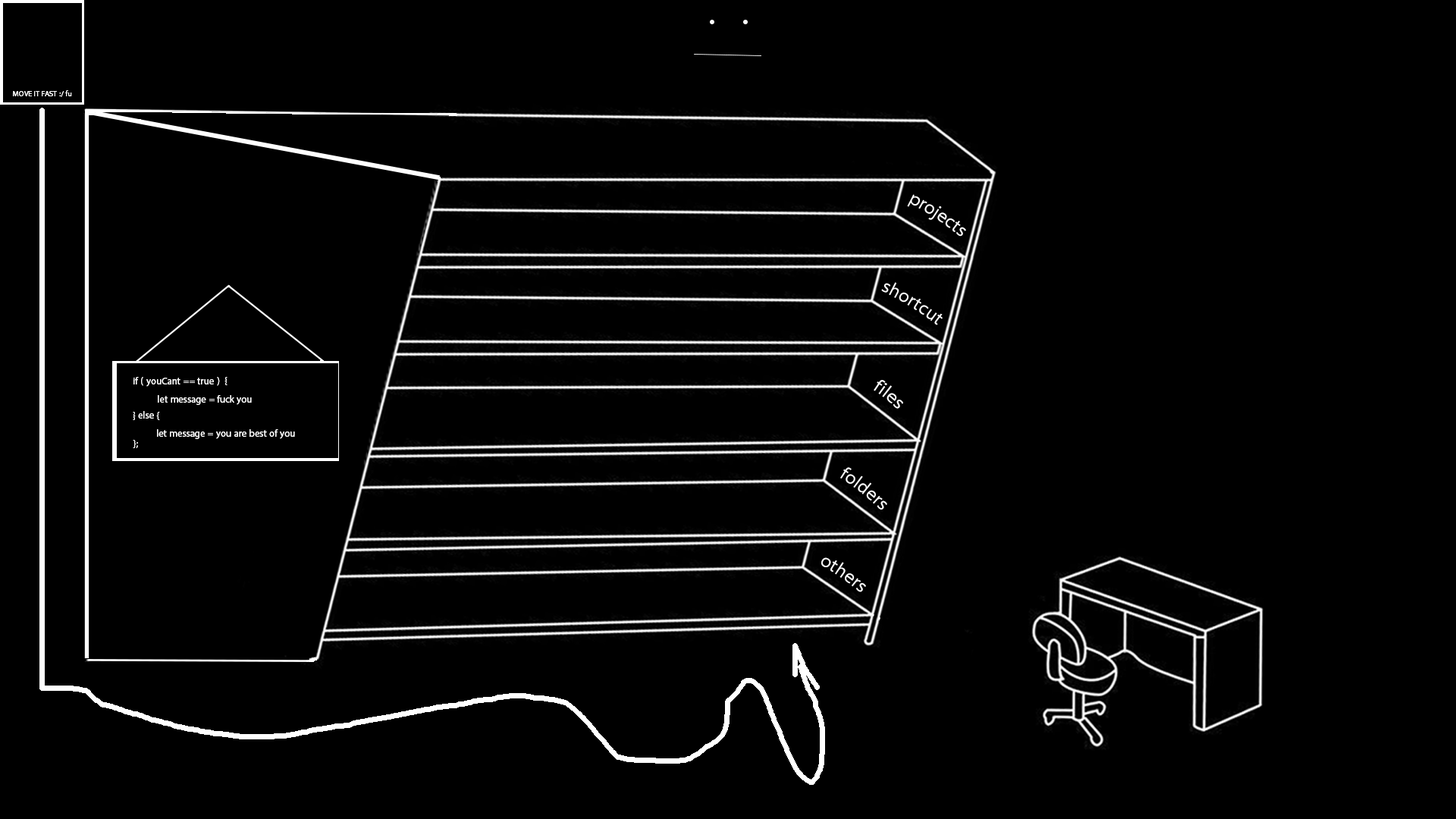
<style>
.page{position:relative;width:1456px;height:819px;background:#000000}
.page>*{position:absolute;margin:0}
.t1{font:10.6px "MyriadArabic-Regular";color:#ffffff}
.t2{font:25.7px "MyriadArabic-Regular";color:#ffffff}
.t3{font:13.6px "MyriadArabic-Regular";color:#ffffff}
</style>
<div class="page">
<p class="t1" style="left:13px;top:90px;width:59px;height:7px">MOVE IT FAST :/ fu</p>
<p class="t2" style="left:907px;top:194px;width:59px;height:43px;rotate:34deg">projects</p>
<p class="t2" style="left:881px;top:282px;width:62px;height:43px;rotate:32deg">shortcut</p>
<p class="t3" style="left:133px;top:377px;width:87px;height:10px">if ( youCant == true )</p>
<p class="t3" style="left:224px;top:377px;width:3px;height:8px">}</p>
<p class="t2" style="left:874px;top:380px;width:30px;height:29px;rotate:39deg">files</p>
<p class="t3" style="left:158px;top:395px;width:94px;height:10px">let message = fuck you</p>
<p class="t3" style="left:133px;top:411px;width:27px;height:9px">} else {</p>
<p class="t3" style="left:157px;top:429px;width:138px;height:10px">let message = you are best of you</p>
<p class="t3" style="left:133px;top:440px;width:5px;height:8px">;{</p>
<p class="t2" style="left:840px;top:467px;width:47px;height:43px;rotate:39deg">folders</p>
<p class="t2" style="left:821px;top:557px;width:45px;height:35px;rotate:35deg">others</p>
</div>
